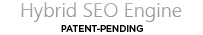
<style>
.page{position:relative;width:203px;height:35px;background:#ffffff}
.page>*{position:absolute;margin:0}
.t1{font:20px "NirmalaUI-Semilight";color:#a3a3a3}
.t2{font:9px "Gotham-Medium";color:#000000}
</style>
<div class="page">
<p class="t1" style="left:21px;top:2px;width:161px;height:20px">Hybrid SEO Engine</p>
<p class="t2" style="left:61px;top:25px;width:82px;height:7px">PATENT-PENDING</p>
</div>
